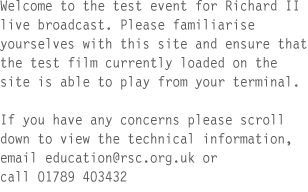
<style>
.page{position:relative;width:308px;height:192px;background:#ffffff}
.page>*{position:absolute;margin:0}
.t1{font:15px/19px "LetterGothic12PitchBT-Roman";color:#5e5e5e}
</style>
<div class="page">
<p class="t1" style="left:0px;top:0px;width:307px;height:182px">Welcome to the test event for Richard II live broadcast. Please familiarise <br>yourselves with this site and ensure that the test film currently loaded on the site is able to play from your terminal. <br><br>If you have any concerns please scroll down to view the technical information, email education@rsc.org.uk or <br>call 01789 403432</p>
</div>
